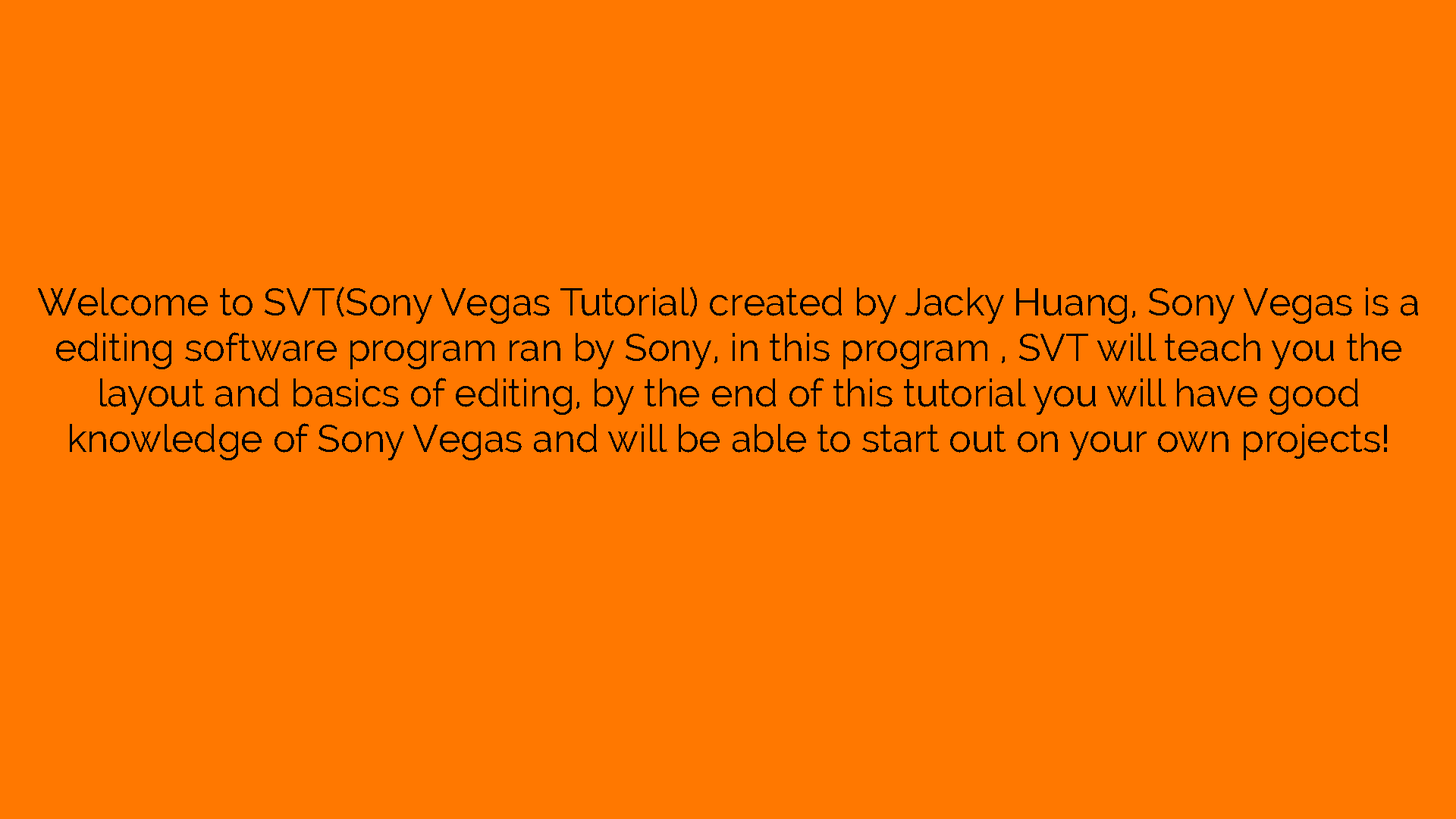
<style>
.page{position:relative;width:1456px;height:819px;background:#ff7800}
.page>*{position:absolute;margin:0}
.t1{font:37.9px "Raleway";color:#000000}
</style>
<div class="page">
<p class="t1" style="left:38px;top:287px;width:1380px;height:173px;text-align:center">Welcome to SVT(Sony Vegas Tutorial) created by Jacky Huang, Sony Vegas is a editing software program ran by Sony, in this program , SVT will teach you the layout and basics of editing, by the end of this tutorial you will have good knowledge of Sony Vegas and will be able to start out on your own projects!</p>
</div>
